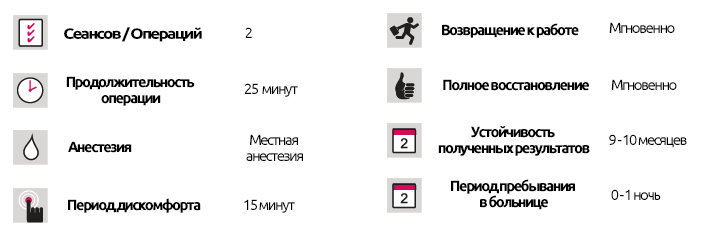
<style>
.page{position:relative;width:718px;height:227px;background:#ffffff}
.page>*{position:absolute;margin:0}
.t1{font:14.7px "Ubuntu-Bold";letter-spacing:-0.1em;color:#000000;scale:1.15 1}
.t2{font:14.7px "Ubuntu";letter-spacing:-0.1em;color:#000000}
.t3{font:14.7px "Ubuntu-Bold";letter-spacing:-0.1em;color:#000000}
.t4{font:14.7px/16px "Ubuntu-Bold";letter-spacing:-0.1em;color:#000000}
.t5{font:14.7px/16px "Ubuntu";letter-spacing:-0.1em;color:#000000}
</style>
<div class="page">
<p class="t1" style="left:64px;top:27px;width:138px;height:15px">Сеансов / Операций</p>
<p class="t2" style="left:245px;top:27px;width:7px;height:11px">2</p>
<p class="t3" style="left:442px;top:23px;width:137px;height:15px">Возвращение к работе</p>
<p class="t2" style="left:609px;top:22px;width:66px;height:11px">Мгновенно</p>
<p class="t4" style="left:66px;top:76px;width:129px;height:30px;text-align:center">Продолжительность <br>операции</p>
<p class="t2" style="left:244px;top:83px;width:54px;height:14px">25  минут</p>
<p class="t3" style="left:443px;top:79px;width:146px;height:12px">Полное восстановление</p>
<p class="t2" style="left:611px;top:79px;width:66px;height:11px">Мгновенно</p>
<p class="t4" style="left:438px;top:125px;width:152px;height:31px;text-align:center">Устойчивость <br>полученных результатов</p>
<p class="t5" style="left:246px;top:134px;width:57px;height:27px;text-align:center">Местная <br>анестезия</p>
<p class="t2" style="left:609px;top:134px;width:78px;height:14px">9 - 10 месяцев</p>
<p class="t3" style="left:68px;top:141px;width:64px;height:12px">Анестезия</p>
<p class="t4" style="left:451px;top:179px;width:124px;height:31px;text-align:center">Период пребывания <br>в больнице</p>
<p class="t3" style="left:68px;top:198px;width:133px;height:15px">Период дискомфорта</p>
<p class="t2" style="left:611px;top:189px;width:50px;height:11px">0 - 1 ночь</p>
<p class="t2" style="left:244px;top:199px;width:51px;height:14px">15 минут</p>
</div>
